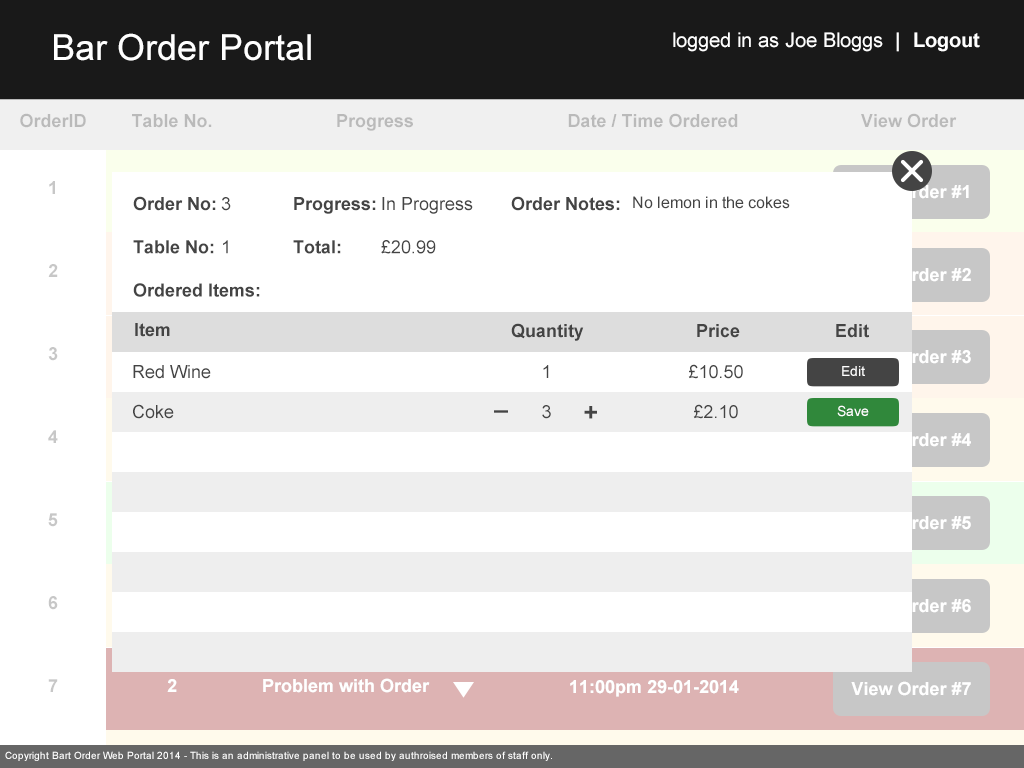
<style>
.page{position:relative;width:1024px;height:768px;background:#ffffff}
.page>*{position:absolute;margin:0}
.t1{font:36px "ArialMT";color:#ffffff}
.t2{font:20px "ArialMT";color:#ffffff}
.t3{font:20px "Arial-BoldMT";color:#ffffff}
.t4{font:18px "Arial-BoldMT";color:#bababa}
.t5{font:18px "Arial-BoldMT";color:#c7c7c7}
.t6{font:18px/21.6px "Arial-BoldMT";color:#444444}
.t7{font:18px/21.6px "ArialMT";color:#444444}
.t8{font:18px "Arial-BoldMT";color:#444444}
.t9{font:16px "ArialMT";color:#444444}
.t10{font:18px "Arial-BoldMT";color:#ffffff}
.t11{font:18px "ArialMT";color:#444444}
.t12{font:14px "ArialMT";color:#ffffff}
.t13{font:25px "Arial-BoldMT";color:#444444}
.t14{font:10px "ArialMT";color:#ffffff}
</style>
<div class="page">
<p class="t1" style="left:54px;top:33px;width:257px;height:28px">Bar Order Portal</p>
<p class="t2" style="left:673px;top:32px;width:307px;height:20px">logged in as Joe Bloggs<span class="t3">  |  Logout</span></p>
<p class="t4" style="left:20px;top:113px;width:66px;height:15px">OrderID</p>
<p class="t4" style="left:568px;top:113px;width:170px;height:15px">Date / Time Ordered</p>
<p class="t4" style="left:861px;top:113px;width:96px;height:15px">View Order</p>
<p class="t4" style="left:132px;top:114px;width:80px;height:14px">Table No.</p>
<p class="t4" style="left:337px;top:114px;width:76px;height:17px">Progress</p>
<p class="t5" style="left:49px;top:181px;width:6px;height:13px">1</p>
<p class="t6" style="left:133px;top:196px;width:127px;height:101px">Order No:<br><br>Table No:<br><br>Ordered Items:</p>
<p class="t7" style="left:221px;top:197px;width:10px;height:57px">3<br><br>1</p>
<p class="t6" style="left:293px;top:197px;width:83px;height:57px">Progress:<br><br>Total:</p>
<p class="t7" style="left:381px;top:197px;width:92px;height:57px">In Progress<br><br>£20.99</p>
<p class="t8" style="left:511px;top:196px;width:109px;height:15px">Order Notes:</p>
<p class="t9" style="left:633px;top:196px;width:157px;height:13px">No lemon in the cokes</p>
<p class="t5" style="left:48px;top:264px;width:10px;height:13px">2</p>
<p class="t10" style="left:851px;top:267px;width:120px;height:15px">View Order #2</p>
<p class="t8" style="left:135px;top:323px;width:35px;height:14px">Item</p>
<p class="t8" style="left:511px;top:323px;width:73px;height:18px">Quantity</p>
<p class="t8" style="left:697px;top:324px;width:43px;height:14px">Price</p>
<p class="t8" style="left:836px;top:324px;width:33px;height:14px">Edit</p>
<p class="t5" style="left:48px;top:347px;width:10px;height:14px">3</p>
<p class="t11" style="left:133px;top:365px;width:78px;height:14px">Red Wine</p>
<p class="t11" style="left:543px;top:365px;width:6px;height:13px">1</p>
<p class="t11" style="left:688px;top:364px;width:55px;height:15px">£10.50</p>
<p class="t12" style="left:842px;top:366px;width:23px;height:10px">Edit</p>
<p class="t11" style="left:133px;top:404px;width:41px;height:15px">Coke</p>
<p class="t13" style="left:494px;top:410px;width:14px;height:3px">–</p>
<p class="t11" style="left:542px;top:405px;width:9px;height:14px">3</p>
<p class="t13" style="left:584px;top:406px;width:13px;height:13px">+</p>
<p class="t11" style="left:693px;top:404px;width:45px;height:15px">£2.10</p>
<p class="t12" style="left:837px;top:405px;width:32px;height:12px">Save</p>
<p class="t5" style="left:48px;top:430px;width:10px;height:13px">4</p>
<p class="t10" style="left:851px;top:432px;width:120px;height:15px">View Order #4</p>
<p class="t5" style="left:48px;top:513px;width:10px;height:14px">5</p>
<p class="t10" style="left:851px;top:515px;width:120px;height:15px">View Order #5</p>
<p class="t5" style="left:48px;top:596px;width:10px;height:14px">6</p>
<p class="t10" style="left:851px;top:598px;width:120px;height:15px">View Order #6</p>
<p class="t10" style="left:263px;top:678px;width:167px;height:15px">Problem with Order</p>
<p class="t5" style="left:48px;top:679px;width:10px;height:13px">7</p>
<p class="t10" style="left:167px;top:679px;width:10px;height:13px">2</p>
<p class="t10" style="left:570px;top:680px;width:169px;height:17px">11:00pm 29-01-2014</p>
<p class="t10" style="left:851px;top:681px;width:120px;height:15px">View Order #7</p>
<p class="t14" style="left:5px;top:751px;width:547px;height:10px">Copyright Bart Order Web Portal 2014 - This is an administrative panel to be used by authroised members of staff only.</p>
</div>
